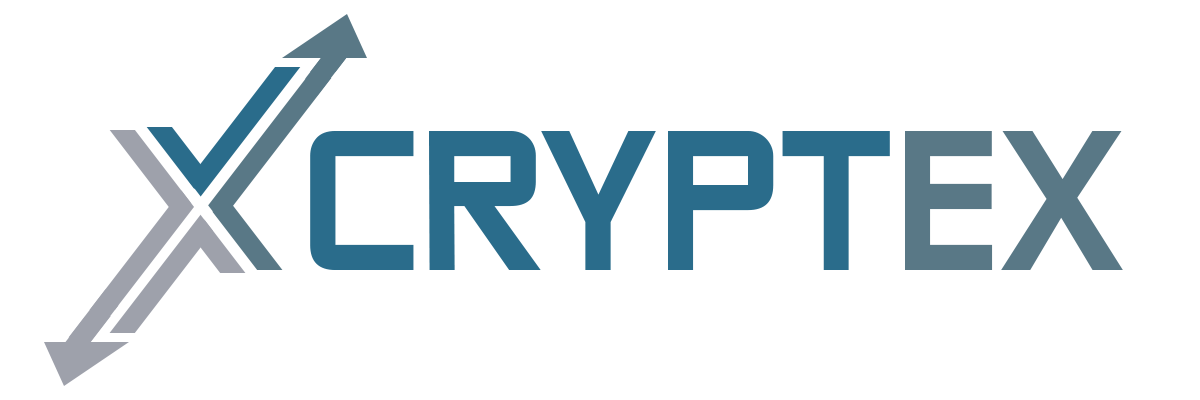
<style>
.page{position:relative;width:1200px;height:400px;background:#ffffff}
.page>*{position:absolute;margin:0}
.t1{font:200px "ZeroesThree-Regular";color:#2a6c8b}
.t2{font:200px "ZeroesThree-Regular";color:#597886}
</style>
<div class="page">
<p class="t1" style="left:310px;top:131px;width:813px;height:139px">CRYPT<span class="t2">EX</span></p>
</div>
